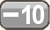
<style>
.page{position:relative;width:50px;height:30px}
.page>*{position:absolute;margin:0}
.t1{font:26.3px "Arial-BoldMT";letter-spacing:-0.1em;color:#ffffff;scale:0.95 1}
</style>
<div class="page">
<p class="t1" style="left:22px;top:5px;width:23px;height:19px">10</p>
</div>
